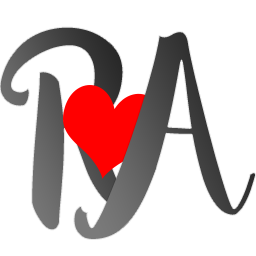
<style>
.page{position:relative;width:256px;height:256px;background:#ffffff}
.page>*{position:absolute;margin:0}
.t1{font:260px "Sophia";letter-spacing:-0.01em;color:#ffffff}
</style>
<div class="page">
<p class="t1" style="left:0px;top:26px;width:157px;height:205px">R</p>
<p class="t1" style="left:73px;top:31px;width:183px;height:209px">A</p>
</div>
